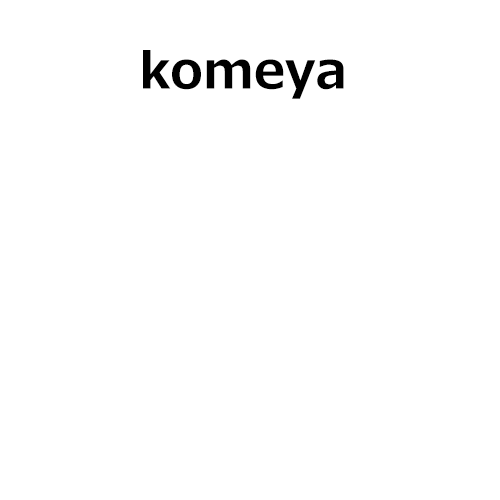
<style>
.page{position:relative;width:500px;height:500px;background:#ffffff}
.page>*{position:absolute;margin:0}
.t1{font:50px "Meiryo-Bold";color:#000000}
</style>
<div class="page">
<p class="t1" style="left:143px;top:50px;width:201px;height:49px">komeya</p>
</div>
